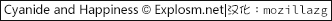
<style>
.page{position:relative;width:332px;height:21px;background:#ffffff}
.page>*{position:absolute;margin:0}
.t1{font:12px "MicrosoftYaHeiUI";color:#111111}
.t2{font:12px "ArialMT";color:#111111}
.t3{font:12px "DFGirl";color:#111111}
.t4{font:12px "SourceCodePro-Regular";color:#111111}
</style>
<div class="page">
<p class="t1" style="left:4px;top:4px;width:324px;height:13px">Cyanide and Happiness<span class="t2"> © </span>Explosm.net|<span class="t3">汉化：</span><span class="t4">mozillazg</span></p>
</div>
